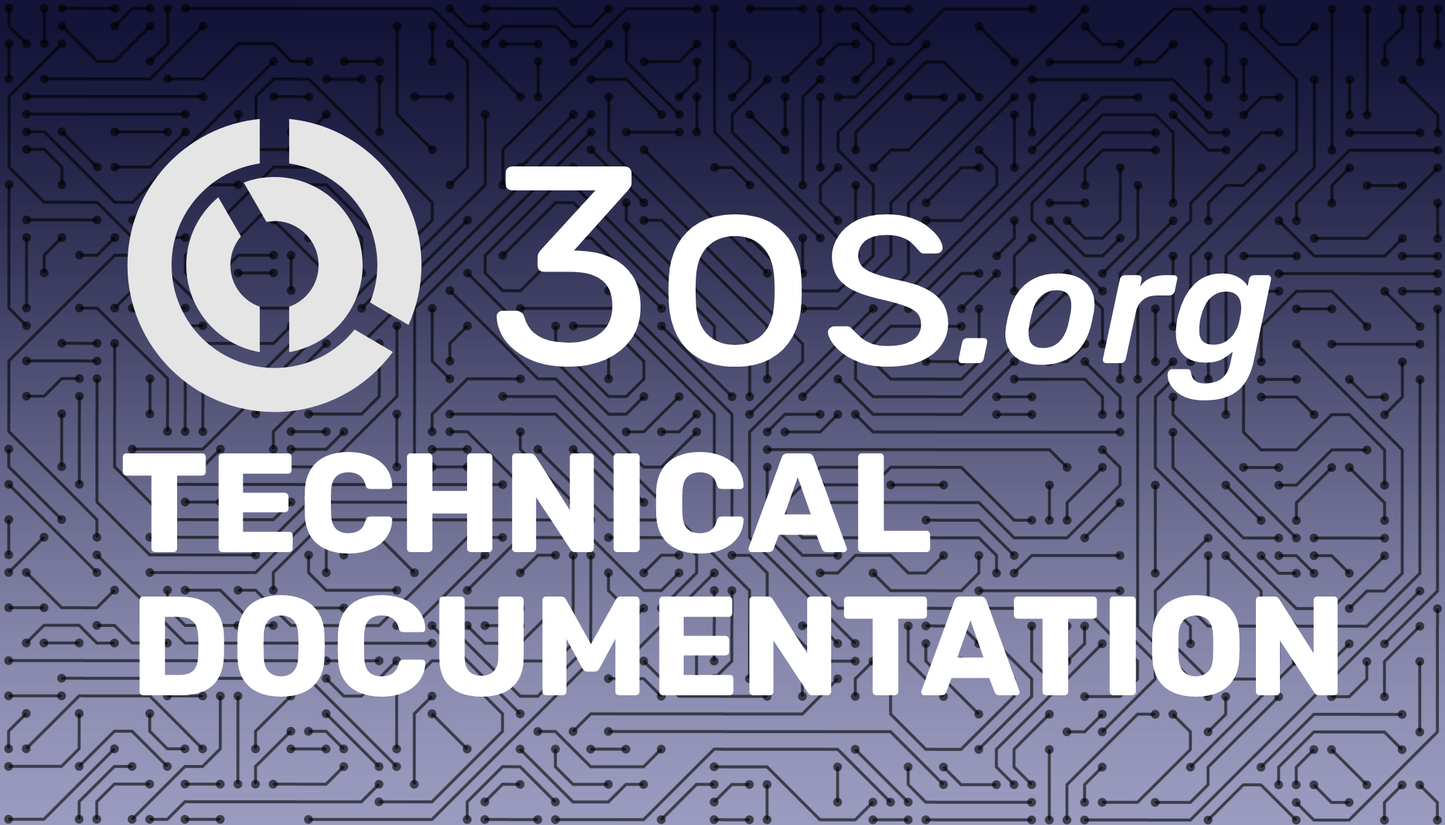
<style>
.page{position:relative;width:1445px;height:825px}
.page>*{position:absolute;margin:0}
.t1{font:282.2px "Rubik-Regular";color:#ffffff}
.t2{font:169.3px "Rubik-MediumItalic";color:#ffffff}
.t3{font:141.1px "Rubik-Bold";color:#ffffff}
</style>
<div class="page">
<p class="t1" style="left:496px;top:166px;width:452px;height:201px">3os</p>
<p class="t2" style="left:958px;top:273px;width:313px;height:128px">.org</p>
<p class="t3" style="left:123px;top:452px;width:807px;height:102px">TECHNICAL</p>
<p class="t3" style="left:139px;top:595px;width:1199px;height:102px">DOCUMENTATION</p>
</div>
